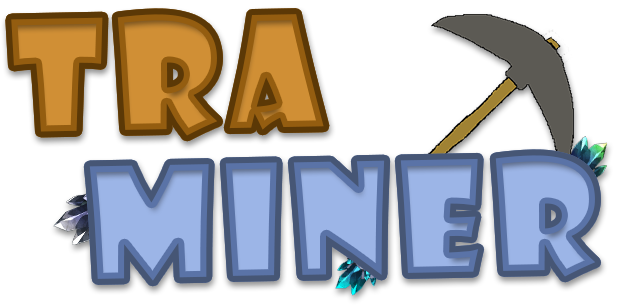
<style>
.page{position:relative;width:620px;height:308px;background:#ffffff}
.page>*{position:absolute;margin:0}
.t1{font:150px "ShowcardGothic-Reg";letter-spacing:0.075em;color:#d08f35}
.t2{font:150px "ShowcardGothic-Reg";letter-spacing:0.075em;color:#9cb5e7}
</style>
<div class="page">
<p class="t1" style="left:11px;top:14px;width:313px;height:122px;rotate:-1deg">Tra</p>
<p class="t2" style="left:89px;top:155px;width:507px;height:126px;rotate:-1deg">Miner</p>
</div>
